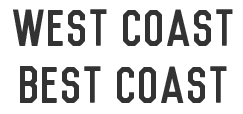
<style>
.page{position:relative;width:243px;height:114px;background:#ffffff}
.page>*{position:absolute;margin:0}
.t1{font:48px "Vincent-Regular";color:#333333}
</style>
<div class="page">
<p class="t1" style="left:13px;top:9px;width:220px;height:94px;text-align:center">West Coast<br>Best Coast</p>
</div>
